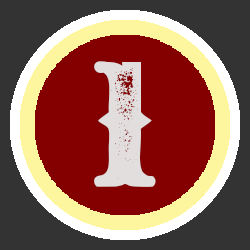
<style>
.page{position:relative;width:250px;height:250px;background:#840000}
.page>*{position:absolute;margin:0}
.t1{font:200px "Docktrin";color:#e2dede}
</style>
<div class="page">
<p class="t1" style="left:94px;top:61px;width:62px;height:126px">1</p>
</div>
